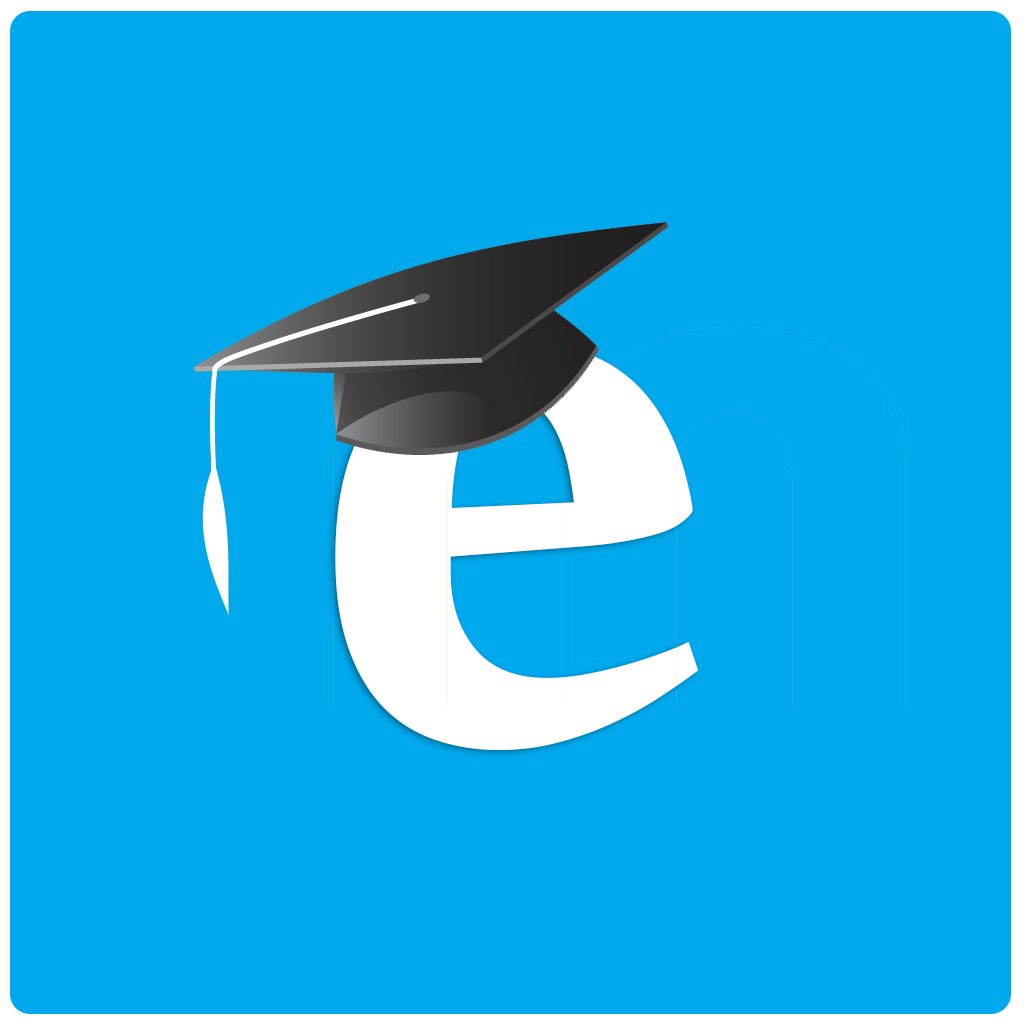
<style>
.page{position:relative;width:1024px;height:1024px;background:#00a8ec}
.page>*{position:absolute;margin:0}
.t1{font:1296px "MoolBoran";color:#ffffff}
</style>
<div class="page">
<p class="t1" style="left:335px;top:344px;width:364px;height:406px">e</p>
</div>
